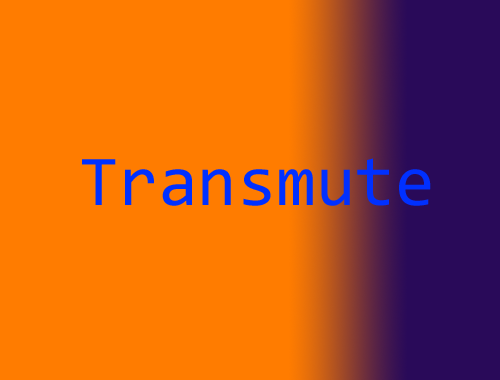
<style>
.page{position:relative;width:500px;height:380px;background:#ff7c00}
.page>*{position:absolute;margin:0}
.t1{font:71.7px "Consolas";color:#0030ff}
</style>
<div class="page">
<p class="t1" style="left:82px;top:158px;width:349px;height:48px">Transmute</p>
</div>
